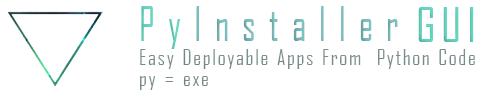
<style>
.page{position:relative;width:500px;height:100px;background:#ffffff}
.page>*{position:absolute;margin:0}
.t1{font:45.7px "AgencyFB-Reg";letter-spacing:0.08em;scale:0.83 1}
.t2{font:45.8px "AgencyFB-Reg";letter-spacing:0.08em;color:#63d4bd}
.t3{font:20.8px "AgencyFB-Reg";letter-spacing:0.08em;color:#7a8e8e}
.t4{font:20.8px "AgencyFB-Reg";letter-spacing:0.08em;color:#798d8d}
</style>
<div class="page">
<p class="t1" style="left:141px;top:6px;width:257px;height:43px">PyInstaller</p>
<p class="t2" style="left:418px;top:7px;width:56px;height:35px">GUI</p>
<p class="t3" style="left:140px;top:49px;width:335px;height:20px">Easy Deployable Apps From  Python Code</p>
<p class="t4" style="left:140px;top:76px;width:68px;height:14px">py = exe</p>
</div>
